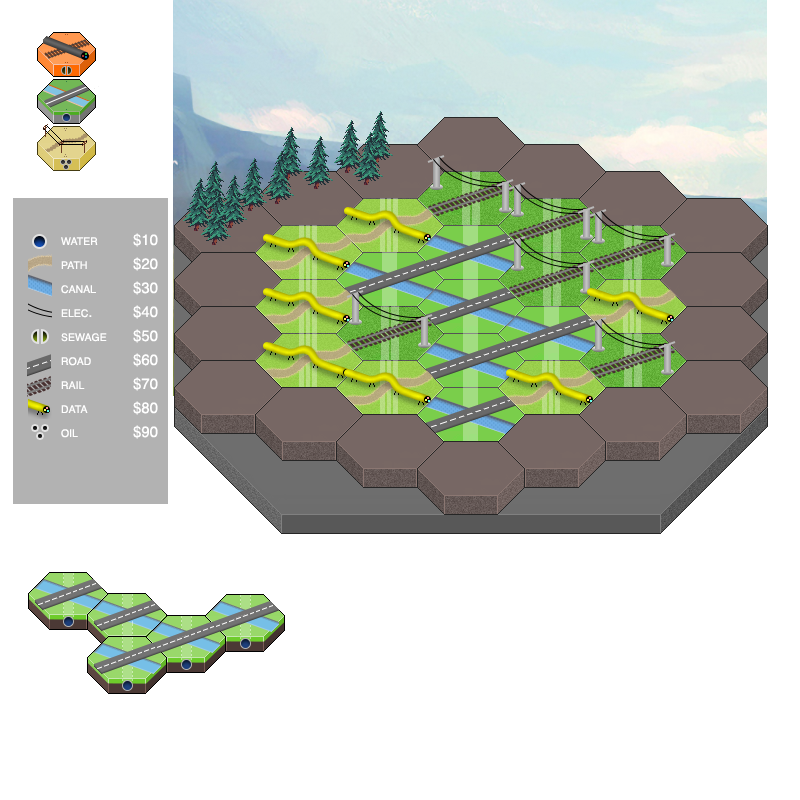
<style>
.page{position:relative;width:800px;height:800px;background:#ffffff}
.page>*{position:absolute;margin:0}
.t1{font:15px/24px "Helvetica";color:#ffffff;font-variant:small-caps}
</style>
<div class="page">
<p class="t1" style="left:61px;top:233px;width:97px;height:206px">water $10<br>path  $20<br>canal  $30<br>elec.  $40<br>sewage $50<br>road  $60<br>rail  $70<br>data  $80<br>oil  $90</p>
</div>
